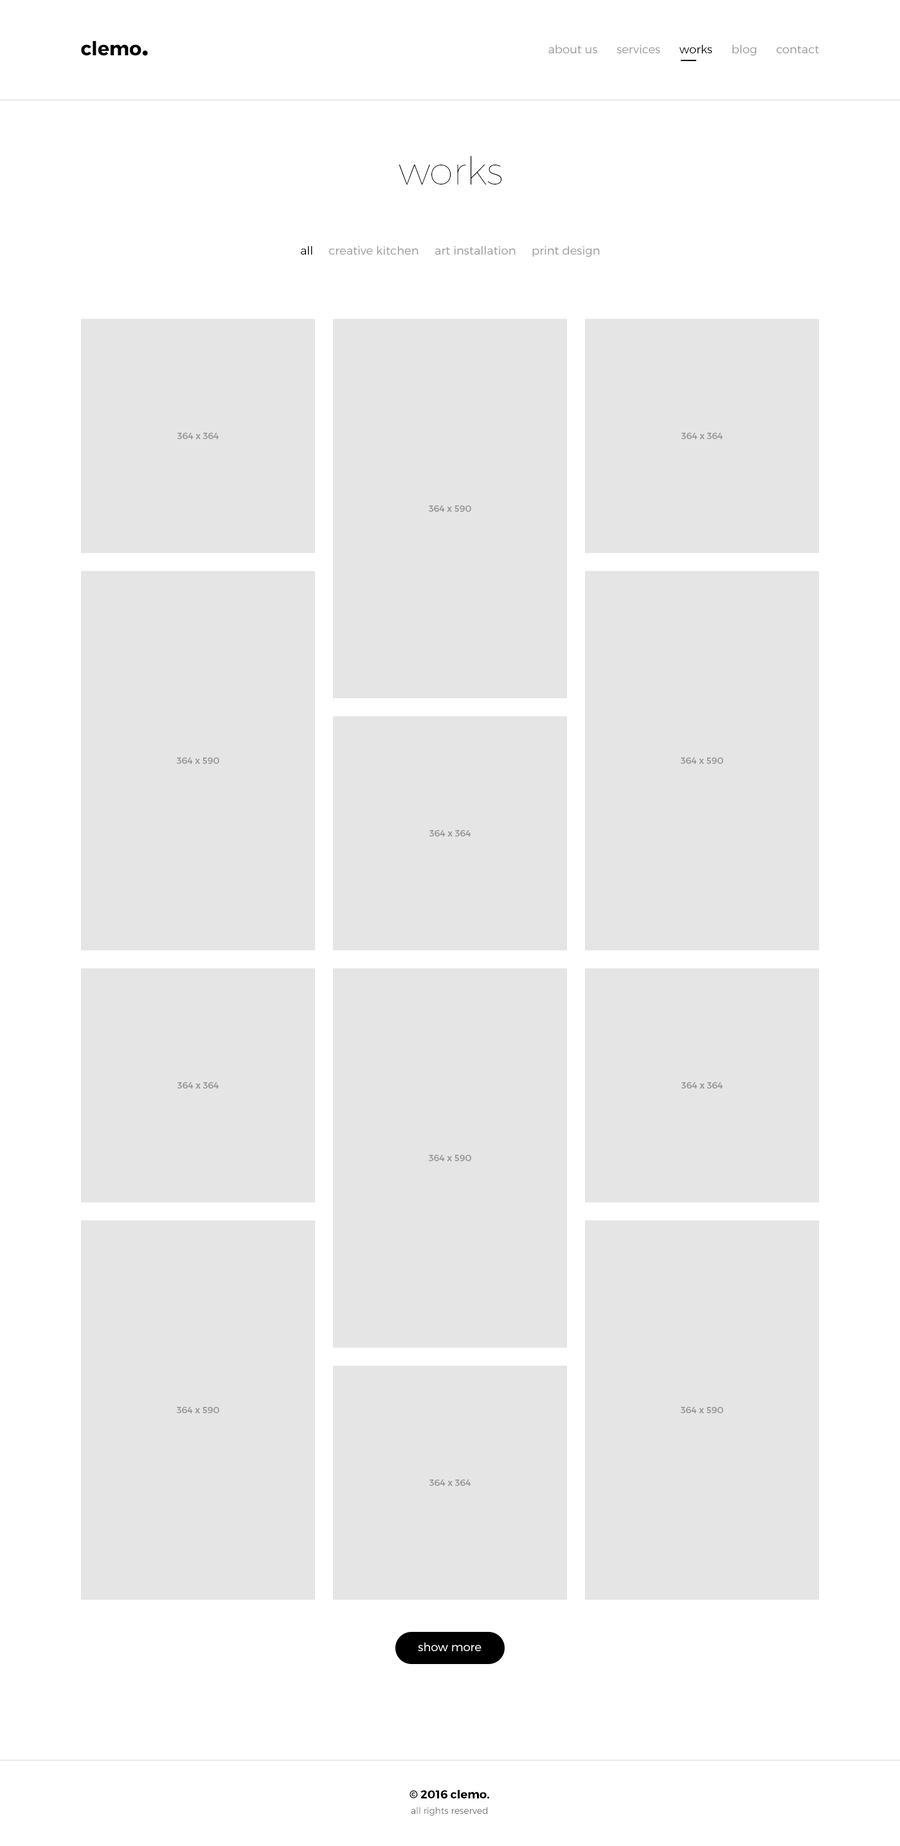
<style>
.page{position:relative;width:900px;height:1846px;background:#e5e5e5}
.page>*{position:absolute;margin:0}
.t1{font:19.3px "Montserrat-Bold";color:#000000}
.t2{font:30.9px "Montserrat-Bold";color:#000000}
.t3{font:11.6px "Montserrat-Light";color:#989898}
.t4{font:11.6px "Montserrat-Light";color:#000000}
.t5{font:38.6px "Montserrat-Hairline";color:#000000}
.t6{font:9px "Montserrat-Regular";color:#989898}
.t7{font:11.6px "Montserrat-Light";color:#ffffff}
.t8{font:9px/15.4px "Montserrat-Light";color:#656565}
.t9{font:11.6px/15.4px "Montserrat-Bold";color:#000000}
</style>
<div class="page">
<p class="t1" style="left:81px;top:40px;width:67px;height:16px">clemo<span class="t2">.</span></p>
<p class="t3" style="left:548px;top:44px;width:271px;height:12px">about us      services      <span class="t4">works</span>      blog      contact</p>
<p class="t5" style="left:399px;top:156px;width:103px;height:28px">works</p>
<p class="t3" style="left:301px;top:246px;width:299px;height:11px"><span class="t4">all </span>    creative kitchen     art installation     print design</p>
<p class="t6" style="left:177px;top:433px;width:42px;height:6px">364 x 364</p>
<p class="t6" style="left:681px;top:433px;width:42px;height:6px">364 x 364</p>
<p class="t6" style="left:429px;top:505px;width:42px;height:7px">364 x 590</p>
<p class="t6" style="left:177px;top:757px;width:42px;height:7px">364 x 590</p>
<p class="t6" style="left:681px;top:757px;width:42px;height:7px">364 x 590</p>
<p class="t6" style="left:429px;top:830px;width:42px;height:6px">364 x 364</p>
<p class="t6" style="left:177px;top:1082px;width:42px;height:6px">364 x 364</p>
<p class="t6" style="left:681px;top:1082px;width:42px;height:6px">364 x 364</p>
<p class="t6" style="left:429px;top:1155px;width:42px;height:6px">364 x 590</p>
<p class="t6" style="left:177px;top:1407px;width:42px;height:6px">364 x 590</p>
<p class="t6" style="left:681px;top:1407px;width:42px;height:6px">364 x 590</p>
<p class="t6" style="left:429px;top:1479px;width:42px;height:7px">364 x 364</p>
<p class="t7" style="left:418px;top:1642px;width:64px;height:9px">show more</p>
<p class="t8" style="left:410px;top:1789px;width:79px;height:26px;text-align:center"><span class="t9">© 2016 clemo.<br></span>all rights reserved</p>
</div>
